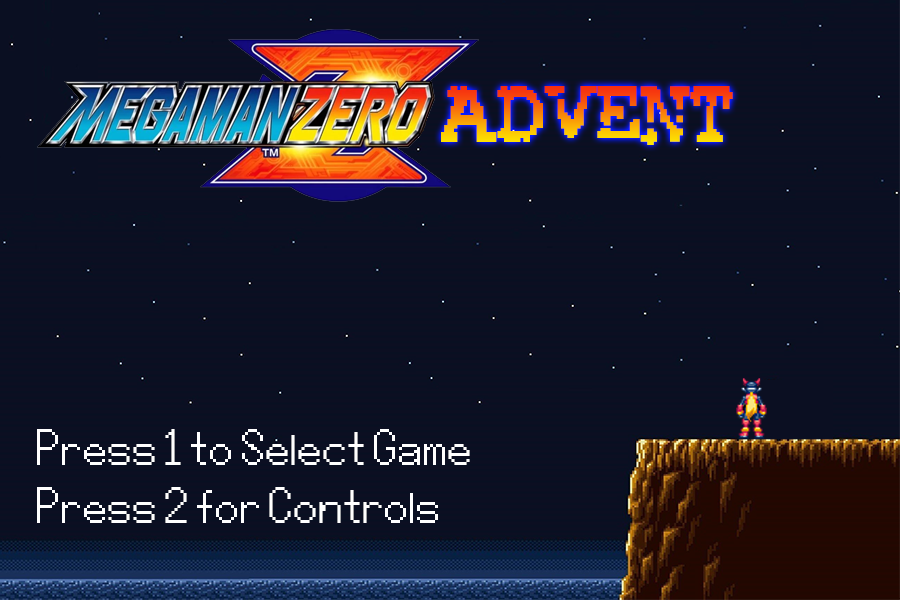
<style>
.page{position:relative;width:900px;height:600px;background:#0c0f22}
.page>*{position:absolute;margin:0}
.t1{font:65px "RubberBiscuitBold"}
.t2{font:24px "Mega-Man-ZX";color:#ffffff}
</style>
<div class="page">
<p class="t1" style="left:441px;top:86px;width:292px;height:59px">Advent</p>
<p class="t2" style="left:37px;top:429px;width:433px;height:94px">Press 1 to Select Game<br><br>Press 2 for Controls</p>
</div>
